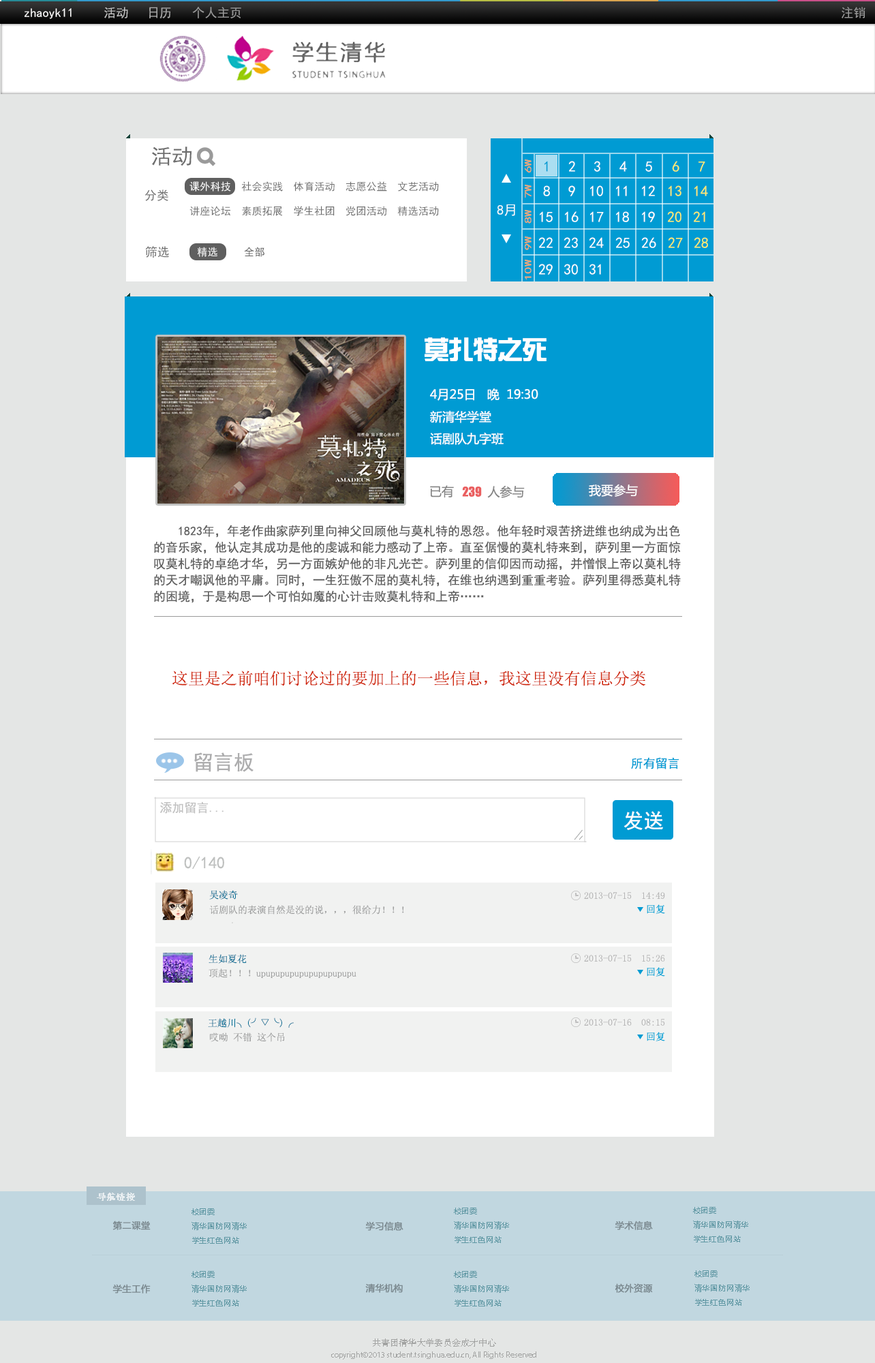
<style>
.page{position:relative;width:875px;height:1363px;background:#e4e6e5}
.page>*{position:absolute;margin:0}
.t1{font:12.4px "SimHei";color:#fffefe}
.t2{font:12.4px "SimHei";color:#c3c3c3}
.t3{font:12.4px "SimHei";color:#a9a9a9}
.t4{font:12.4px "SimHei";color:#9b9b9b}
.t5{font:21.1px "SimHei";color:#6e6e6e}
.t6{font:9.5px "SimHei";color:#ffaa6c;scale:1.5 1}
.t7{font:15px "SimHei";color:#009bd3}
.t8{font:15px "SimHei";color:#fefefe}
.t9{font:15px "SimHei";color:#ffec6c}
.t10{font:10.4px/24.5px "SimHei";color:#6e6e6e}
.t11{font:10.4px/24.5px "SimHei";color:#fefefe}
.t12{font:12.3px "SimHei";color:#6e6e6e}
.t13{font:13.6px "SimHei";color:#ffffff}
.t14{font:24.5px "By-JOSSQ-DMF-in-BeiJing";color:#ffffff}
.t15{font:12.3px "MicrosoftYaHei";color:#ffffff}
.t16{font:12.3px "MicrosoftYaHei";color:#fdfeff}
.t17{font:12.3px "MicrosoftYaHei";color:#868686}
.t18{font:12.3px "Impact";color:#ea5e5f}
.t19{font:12.3px/16.4px "SimHei";color:#5f5f5f}
.t20{font:16.4px "NSimSun";color:#d0260a}
.t21{font:20.4px "SimHei";color:#adadae}
.t22{font:12.3px "SimHei";color:#009bd3}
.t23{font:12.3px "SimHei";color:#c2c2c2}
.t24{font:20.4px "SimHei";color:#ffffff}
.t25{font:16.4px "SimHei";color:#bec0bf}
.t26{font:9.5px "NSimSun";color:#016d94}
.t27{font:9.5px "NSimSun";color:#b6b6b6}
.t28{font:9.5px "NSimSun";color:#9b9c9c}
.t29{font:9.1px "STSong";color:#ffffff;font-weight:bold}
.t30{font:7.3px/14.5px "MicrosoftYaHei";letter-spacing:0.075em;color:#5f97a3}
.t31{font:9.1px "MicrosoftYaHei";color:#7a888e;font-weight:bold}
.t32{font:8.2px/12.7px "MyriadPro-Regular";color:#a2a3a2}
.t33{font:9.1px/12.7px "STSong";color:#a2a3a2}
</style>
<div class="page">
<p class="t1" style="left:25px;top:8px;width:47px;height:11px">zhaoyk11</p>
<p class="t2" style="left:104px;top:7px;width:24px;height:11px">活动</p>
<p class="t3" style="left:149px;top:7px;width:22px;height:11px">日历</p>
<p class="t4" style="left:192px;top:7px;width:49px;height:11px">个人主页</p>
<p class="t4" style="left:842px;top:7px;width:23px;height:11px">注销</p>
<p class="t5" style="left:152px;top:147px;width:40px;height:19px">活动</p>
<p class="t6" style="left:525px;top:159px;width:7px;height:14px;rotate:-90deg">6W</p>
<p class="t7" style="left:544px;top:161px;width:4px;height:11px">1</p>
<p class="t8" style="left:568px;top:161px;width:7px;height:11px">2</p>
<p class="t8" style="left:594px;top:161px;width:6px;height:11px">3</p>
<p class="t8" style="left:619px;top:161px;width:8px;height:11px">4</p>
<p class="t8" style="left:645px;top:161px;width:7px;height:11px">5</p>
<p class="t9" style="left:672px;top:161px;width:7px;height:11px">6</p>
<p class="t9" style="left:698px;top:161px;width:7px;height:11px">7</p>
<p class="t10" style="left:189px;top:181px;width:250px;height:35px"><span class="t11">课外科技 </span> 社会实践  体育活动  志愿公益  文艺活动<br>讲座论坛  素质拓展  学生社团  党团活动  精选活动</p>
<p class="t6" style="left:525px;top:185px;width:7px;height:13px;rotate:-90deg">7W</p>
<p class="t8" style="left:543px;top:185px;width:7px;height:11px">8</p>
<p class="t8" style="left:568px;top:185px;width:7px;height:11px">9</p>
<p class="t8" style="left:590px;top:185px;width:13px;height:11px">10</p>
<p class="t8" style="left:616px;top:185px;width:11px;height:11px">11</p>
<p class="t8" style="left:642px;top:185px;width:13px;height:11px">12</p>
<p class="t9" style="left:668px;top:185px;width:13px;height:11px">13</p>
<p class="t9" style="left:694px;top:185px;width:14px;height:11px">14</p>
<p class="t12" style="left:145px;top:189px;width:23px;height:12px">分类</p>
<p class="t13" style="left:497px;top:204px;width:18px;height:12px">8月</p>
<p class="t6" style="left:525px;top:210px;width:7px;height:14px;rotate:-90deg">8W</p>
<p class="t8" style="left:540px;top:211px;width:13px;height:11px">15</p>
<p class="t8" style="left:565px;top:211px;width:14px;height:11px">16</p>
<p class="t8" style="left:590px;top:211px;width:14px;height:11px">17</p>
<p class="t8" style="left:616px;top:211px;width:13px;height:11px">18</p>
<p class="t8" style="left:642px;top:211px;width:13px;height:11px">19</p>
<p class="t9" style="left:667px;top:211px;width:14px;height:11px">20</p>
<p class="t9" style="left:693px;top:211px;width:12px;height:11px">21</p>
<p class="t12" style="left:145px;top:246px;width:24px;height:12px">筛选</p>
<p class="t6" style="left:525px;top:236px;width:7px;height:14px;rotate:-90deg">9W</p>
<p class="t8" style="left:538px;top:237px;width:15px;height:11px">22</p>
<p class="t8" style="left:564px;top:237px;width:14px;height:11px">23</p>
<p class="t8" style="left:589px;top:237px;width:15px;height:11px">24</p>
<p class="t8" style="left:615px;top:237px;width:15px;height:11px">25</p>
<p class="t8" style="left:641px;top:237px;width:15px;height:11px">26</p>
<p class="t9" style="left:668px;top:237px;width:15px;height:11px">27</p>
<p class="t9" style="left:694px;top:237px;width:14px;height:11px">28</p>
<p class="t6" style="left:525px;top:260px;width:7px;height:19px;rotate:-90deg">10W</p>
<p class="t8" style="left:538px;top:264px;width:15px;height:11px">29</p>
<p class="t8" style="left:564px;top:264px;width:14px;height:11px">30</p>
<p class="t8" style="left:589px;top:264px;width:12px;height:11px">31</p>
<p class="t14" style="left:425px;top:337px;width:122px;height:24px">莫扎特之死</p>
<p class="t15" style="left:430px;top:388px;width:108px;height:13px">4月25日   晚  19:30</p>
<p class="t16" style="left:430px;top:410px;width:61px;height:13px">新清华学堂</p>
<p class="t15" style="left:430px;top:432px;width:74px;height:13px">话剧队九字班</p>
<p class="t17" style="left:430px;top:485px;width:24px;height:12px">已有</p>
<p class="t18" style="left:462px;top:486px;width:20px;height:11px">239</p>
<p class="t17" style="left:487px;top:485px;width:38px;height:13px">人参与</p>
<p class="t15" style="left:589px;top:484px;width:49px;height:13px">我要参与</p>
<p class="t19" style="left:154px;top:525px;width:527px;height:78px">1823年，年老作曲家萨列里向神父回顾他与莫札特的恩怨。他年轻时艰苦挤进维也纳成为出色<br>的音乐家，他认定其成功是他的虔诚和能力感动了上帝。直至倨慢的莫札特来到，萨列里一方面惊<br>叹莫札特的卓绝才华，另一方面嫉妒他的非凡光芒。萨列里的信仰因而动摇，并憎恨上帝以莫札特<br>的天才嘲讽他的平庸。同时，一生狂傲不屈的莫札特，在维也纳遇到重重考验。萨列里得悉莫札特<br>的困境，于是构思一个可怕如魔的心计击败莫札特和上帝……</p>
<p class="t20" style="left:172px;top:671px;width:473px;height:15px">这里是之前咱们讨论过的要加上的一些信息，我这里没有信息分类</p>
<p class="t21" style="left:194px;top:752px;width:59px;height:20px">留言板</p>
<p class="t22" style="left:631px;top:757px;width:48px;height:12px">所有留言</p>
<p class="t23" style="left:160px;top:801px;width:64px;height:13px">添加留言...</p>
<p class="t24" style="left:624px;top:811px;width:39px;height:19px">发送</p>
<p class="t25" style="left:184px;top:856px;width:40px;height:14px">0/140</p>
<p class="t26" style="left:209px;top:890px;width:29px;height:9px">吴凌奇</p>
<p class="t27" style="left:584px;top:892px;width:81px;height:7px">2013-07-15  14:49</p>
<p class="t28" style="left:209px;top:905px;width:195px;height:9px">话剧队的表演自然是没的说，，，很给力！！！</p>
<p class="t26" style="left:209px;top:954px;width:38px;height:10px">生如夏花</p>
<p class="t27" style="left:584px;top:955px;width:81px;height:6px">2013-07-15  15:26</p>
<p class="t28" style="left:209px;top:968px;width:147px;height:10px">顶起！！！upupupupupupupupupupu</p>
<p class="t26" style="left:208px;top:1017px;width:86px;height:11px">王越川╮(╯▽╰)╭</p>
<p class="t27" style="left:584px;top:1019px;width:81px;height:7px">2013-07-16  08:15</p>
<p class="t28" style="left:210px;top:1032px;width:75px;height:10px">哎呦 不错 这个吊</p>
<p class="t29" style="left:97px;top:1192px;width:38px;height:9px;opacity:0.7">导航链接</p>
<p class="t30" style="left:191px;top:1208px;width:56px;height:36px">校团委<br>清华国防网清华<br>学生红色网站</p>
<p class="t30" style="left:454px;top:1207px;width:55px;height:36px">校团委<br>清华国防网清华<br>学生红色网站</p>
<p class="t30" style="left:693px;top:1207px;width:55px;height:35px">校团委<br>清华国防网清华<br>学生红色网站</p>
<p class="t31" style="left:112px;top:1220px;width:39px;height:10px">第二课堂</p>
<p class="t31" style="left:365px;top:1221px;width:38px;height:10px">学习信息</p>
<p class="t31" style="left:615px;top:1220px;width:38px;height:10px">学术信息</p>
<p class="t30" style="left:191px;top:1271px;width:56px;height:35px">校团委<br>清华国防网清华<br>学生红色网站</p>
<p class="t30" style="left:454px;top:1271px;width:55px;height:35px">校团委<br>清华国防网清华<br>学生红色网站</p>
<p class="t30" style="left:694px;top:1270px;width:56px;height:36px">校团委<br>清华国防网清华<br>学生红色网站</p>
<p class="t31" style="left:112px;top:1284px;width:39px;height:9px">学生工作</p>
<p class="t31" style="left:365px;top:1283px;width:38px;height:10px">清华机构</p>
<p class="t31" style="left:615px;top:1283px;width:38px;height:10px">校外资源</p>
<p class="t32" style="left:331px;top:1338px;width:205px;height:21px;text-align:center"><span class="t33">共青团清华大学委员会成才中心<br></span>copyright©2013 student.tsinghua.edu.cn, All Rights Reserved</p>
</div>
